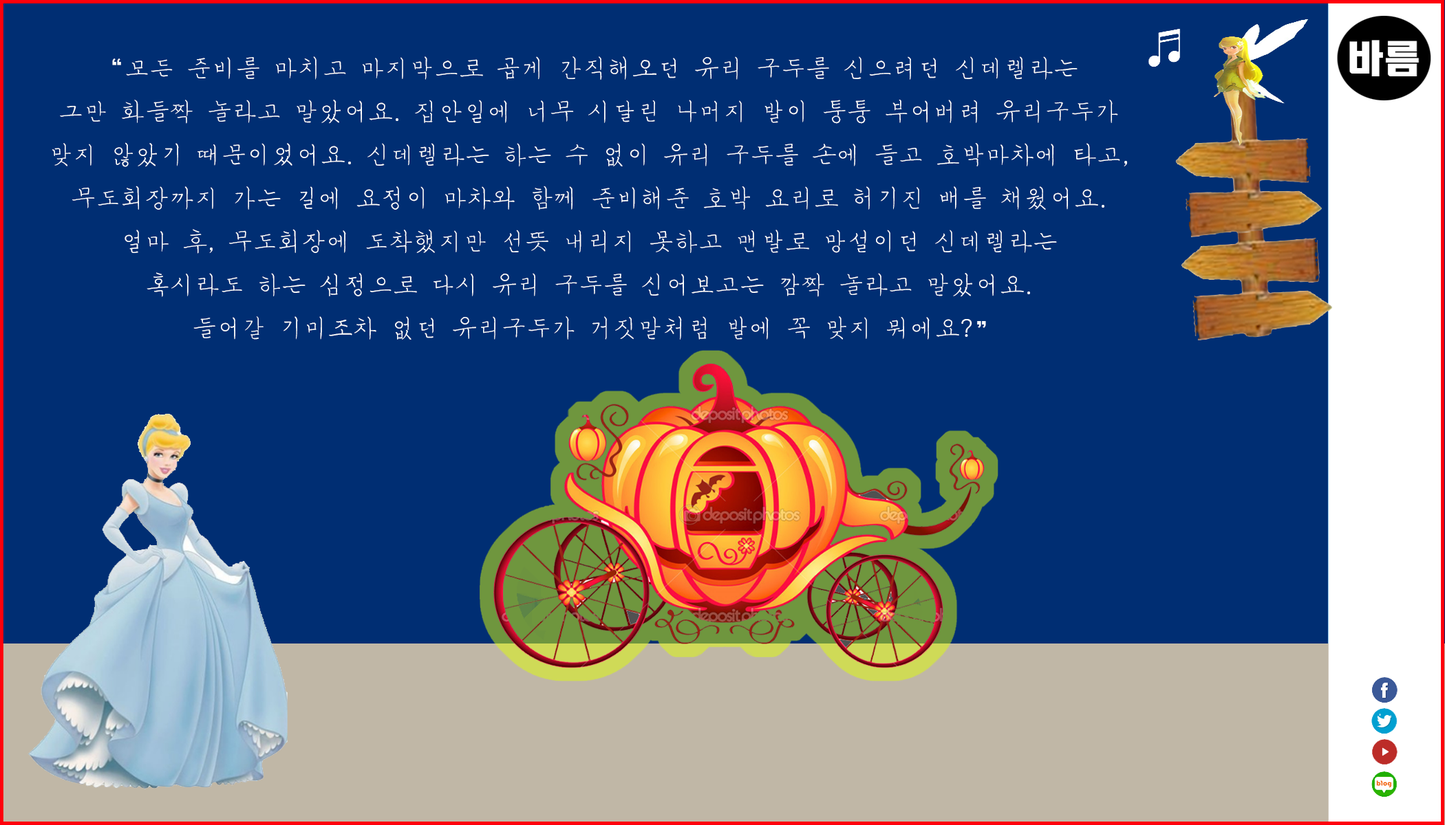
<style>
.page{position:relative;width:1445px;height:825px;background:#002e73}
.page>*{position:absolute;margin:0}
.t1{font:24.8px "MSugiJeong";color:#ffffff}
.t2{font:24.8px "HeadlineR-HM";color:#ffffff}
.t3{font:24.8px "Gulim";color:#ffffff}
</style>
<div class="page">
<p class="t1" style="left:52px;top:56px;width:1075px;height:284px;text-align:center"><span class="t2">“</span>모든 준비를 마치고 마지막으로 곱게 간직해오던 유리 구두를 신으려던 신데렐라는 <br>그만 화들짝 놀라고 말았어요<span class="t3">.</span> 집안일에 너무 시달린 나머지 발이 퉁퉁 부어버려 유리구두가 <br>맞지 않았기 때문이었어요<span class="t3">.</span> 신데렐라는 하는 수 없이 유리 구두를 손에 들고 호박마차에 타고<span class="t3">,</span> <br>무도회장까지 가는 길에 요정이 마차와 함께 준비해준 호박 요리로 허기진 배를 채웠어요<span class="t3">.</span> <br>얼마 후<span class="t3">,</span> 무도회장에 도착했지만 선뜻 내리지 못하고 맨발로 망설이던 신데렐라는 <br>혹시라도 하는 심정으로 다시 유리 구두를 신어보고는 깜짝 놀라고 말았어요<span class="t3">.</span> <br>들어갈 기미조차 없던 유리구두가 거짓말처럼 발에 꼭 맞지 뭐에요<span class="t3">?</span><span class="t2">”</span></p>
</div>
